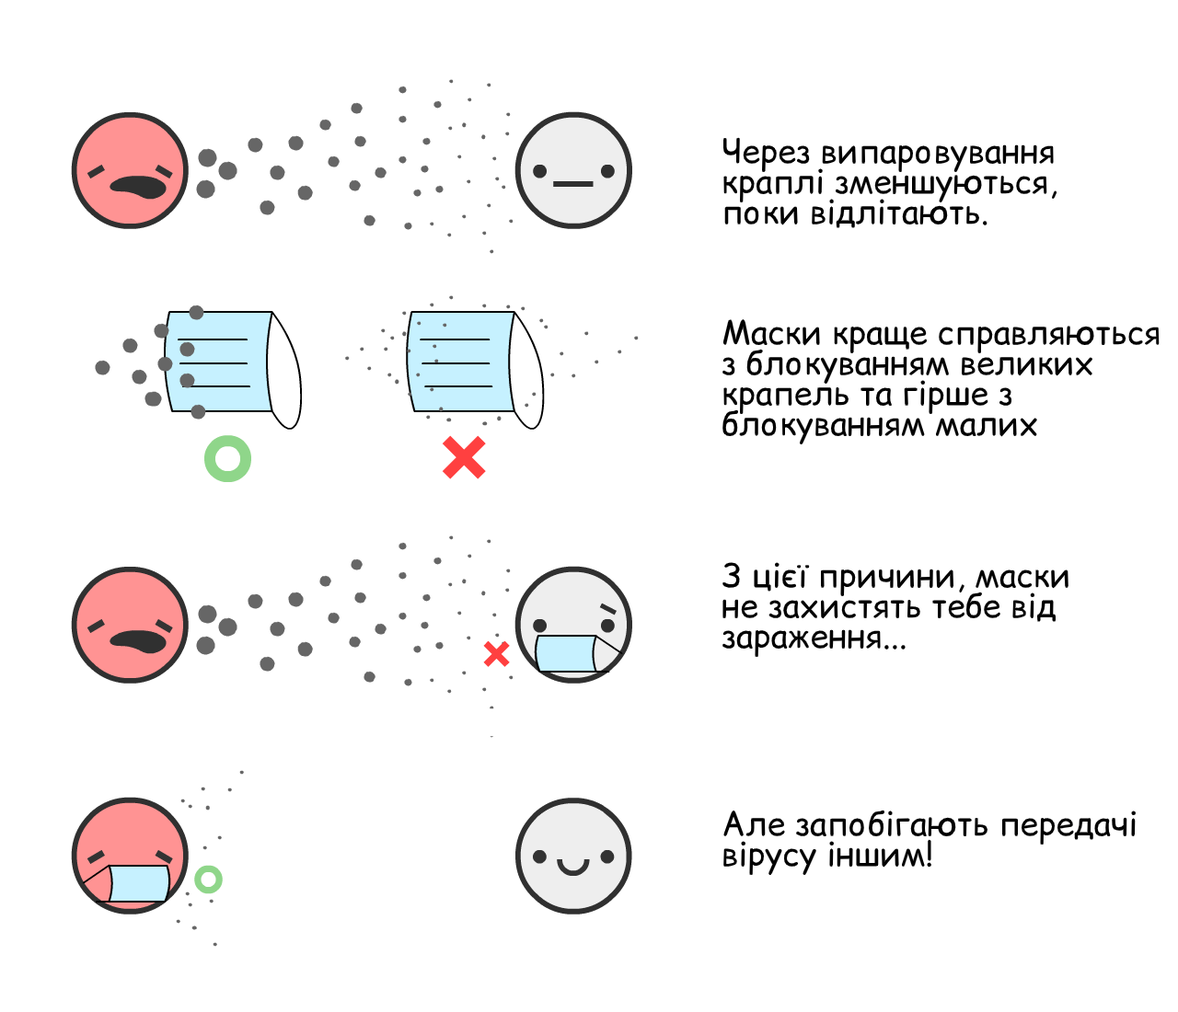
<style>
.page{position:relative;width:1178px;height:1012px;background:#ffffff}
.page>*{position:absolute;margin:0}
.t1{font:33.1px/30.4px "ComicRelief";color:#000000}
</style>
<div class="page">
<p class="t1" style="left:722px;top:137px;width:335px;height:91px">Через випаровування <br>краплі зменшуються,<br>поки відлітають.</p>
<p class="t1" style="left:722px;top:319px;width:438px;height:126px">Маски краще справляються<br>з блокуванням великих <br>крапель та гірше з <br>блокуванням малих</p>
<p class="t1" style="left:722px;top:562px;width:346px;height:96px">З цієї причини, маски<br>не захистять тебе від <br>зараження...</p>
<p class="t1" style="left:722px;top:810px;width:414px;height:66px">Але запобігають передачі<br>вірусу іншим!</p>
</div>
